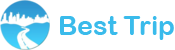
<style>
.page{position:relative;width:175px;height:50px;background:#ffffff}
.page>*{position:absolute;margin:0}
.t1{font:26.7px "ArialRoundedMTBold";color:#3abbeb}
</style>
<div class="page">
<p class="t1" style="left:60px;top:16px;width:114px;height:24px">Best Trip</p>
</div>
